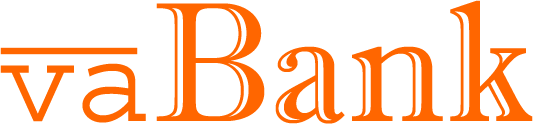
<style>
.page{position:relative;width:533px;height:124px;background:#ffffff}
.page>*{position:absolute;margin:0}
.t1{font:170.7px "ImprintMT-Shadow";color:#ff6600}
.t2{font:128px "Courier";color:#ff6600}
</style>
<div class="page">
<p class="t1" style="left:0px;top:0px;width:533px;height:124px"><span class="t2">va</span>Bank</p>
</div>
